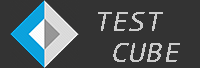
<style>
.page{position:relative;width:200px;height:68px;background:#333333}
.page>*{position:absolute;margin:0}
.t1{font:29.9px/31.1px "Consolas-Italic";color:#cccccc}
</style>
<div class="page">
<p class="t1" style="left:98px;top:12px;width:82px;height:50px">TEST<br> CUBE</p>
</div>
